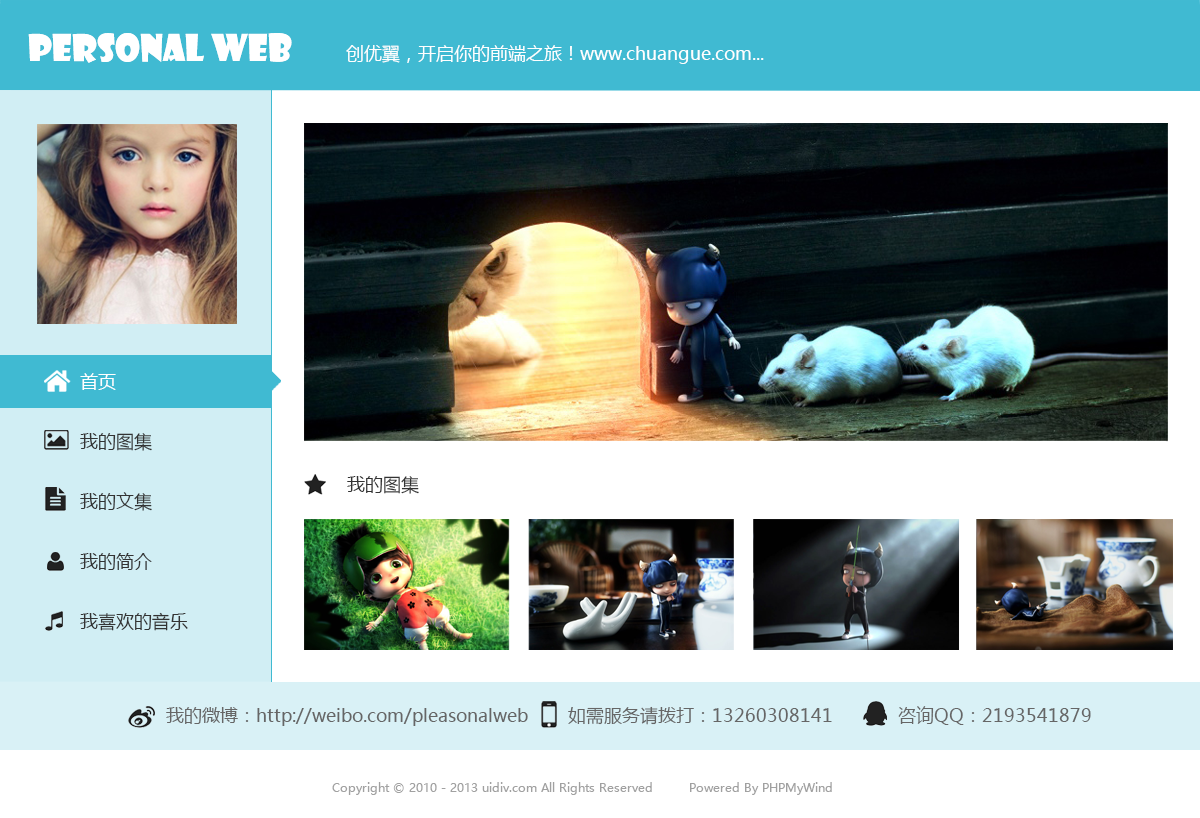
<style>
.page{position:relative;width:1200px;height:818px;background:#ffffff}
.page>*{position:absolute;margin:0}
.t1{font:36px "ShowcardGothic";color:#ffffff}
.t2{font:18px "MicrosoftYaHei";color:#feffff}
.t3{font:18px/30px "MicrosoftYaHei";color:#333333}
.t4{font:18px/30px "MicrosoftYaHei";color:#ffffff}
.t5{font:18px "MicrosoftYaHei";color:#333333}
.t6{font:18px "MicrosoftYaHei";color:#666666}
.t7{font:12px "MicrosoftYaHei";color:#a2a2a2}
</style>
<div class="page">
<p class="t1" style="left:28px;top:33px;width:264px;height:30px">personal web</p>
<p class="t2" style="left:346px;top:45px;width:418px;height:19px">创优翼，开启你的前端之旅！www.chuangue.com...</p>
<p class="t3" style="left:80px;top:373px;width:108px;height:258px"><span class="t4">首页<br></span><br>我的图集<br><br>我的文集<br><br>我的简介<br><br>我喜欢的音乐</p>
<p class="t5" style="left:347px;top:476px;width:72px;height:18px">我的图集</p>
<p class="t6" style="left:166px;top:706px;width:925px;height:20px">我的微博：http://weibo.com/pleasonalweb        如需服务请拨打：13260308141             咨询QQ：2193541879</p>
<p class="t7" style="left:332px;top:782px;width:500px;height:13px">Copyright © 2010 - 2013 uidiv.com All Rights Reserved         Powered By PHPMyWind</p>
</div>
